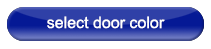
<style>
.page{position:relative;width:211px;height:49px;background:#ffffff}
.page>*{position:absolute;margin:0}
.t1{font:16px "ArialMT";color:#ffffff}
</style>
<div class="page">
<p class="t1" style="left:47px;top:16px;width:118px;height:13px">select door color</p>
</div>
